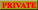
<style>
.page{position:relative;width:38px;height:10px;background:#ad9b1f}
.page>*{position:absolute;margin:0}
.t1{font:8px "TimesNewRomanPS-BoldMT";color:#ff0000}
</style>
<div class="page">
<p class="t1" style="left:2px;top:2px;width:35px;height:7px">PRIVATE</p>
</div>
